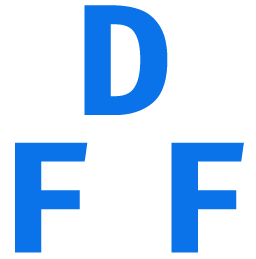
<style>
.page{position:relative;width:256px;height:259px;background:#ffffff}
.page>*{position:absolute;margin:0}
.t1{font:154.2px/137.5px "FiraCode-Bold";letter-spacing:0.4em;color:#0a73e9}
</style>
<div class="page">
<p class="t1" style="left:15px;top:5px;width:229px;height:248px;text-align:center">D<br>FF</p>
</div>
